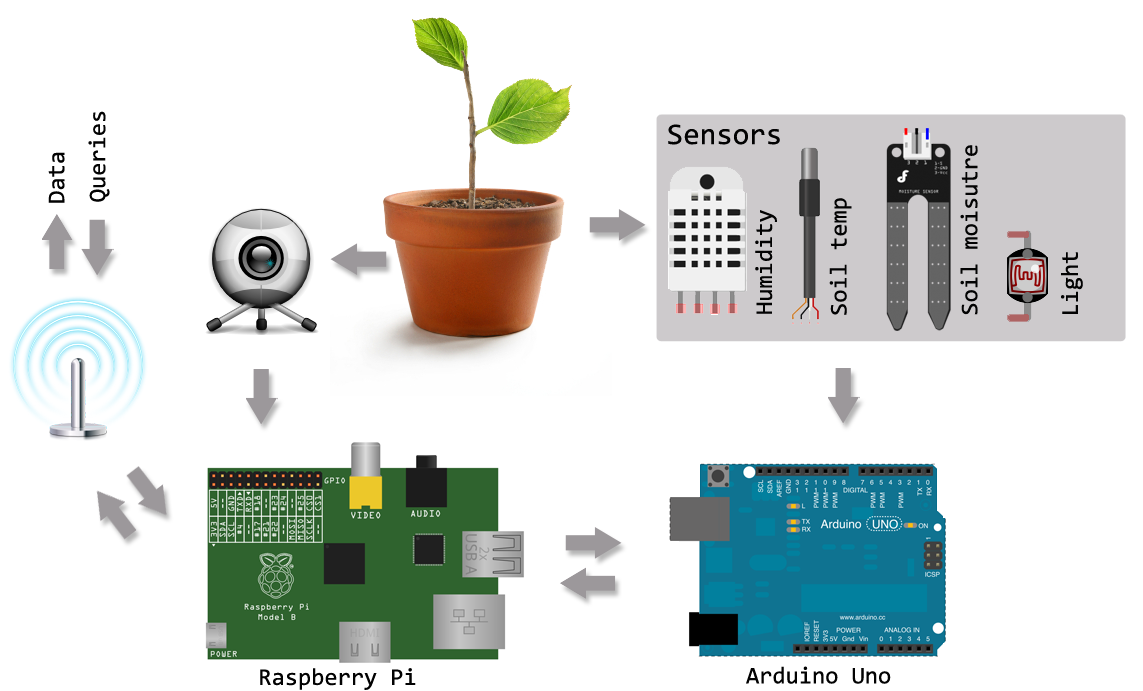
<style>
.page{position:relative;width:1143px;height:691px;background:#ffffff}
.page>*{position:absolute;margin:0}
.t1{font:24px "Consolas";color:#020202}
.t2{font:30px "Consolas";color:#020202}
</style>
<div class="page">
<p class="t1" style="left:88px;top:111px;width:22px;height:91px;rotate:-90deg">Queries</p>
<p class="t2" style="left:668px;top:124px;width:112px;height:21px">Sensors</p>
<p class="t1" style="left:960px;top:145px;width:18px;height:170px;rotate:-90deg">Soil moisutre</p>
<p class="t1" style="left:48px;top:152px;width:17px;height:51px;rotate:-90deg">Data</p>
<p class="t1" style="left:829px;top:198px;width:23px;height:117px;rotate:-90deg">Soil temp</p>
<p class="t1" style="left:755px;top:210px;width:22px;height:104px;rotate:-90deg">Humidity</p>
<p class="t1" style="left:1061px;top:252px;width:22px;height:62px;rotate:-90deg">Light</p>
<p class="t1" style="left:260px;top:668px;width:156px;height:22px">Raspberry Pi</p>
<p class="t1" style="left:746px;top:666px;width:145px;height:18px">Arduino Uno</p>
</div>
